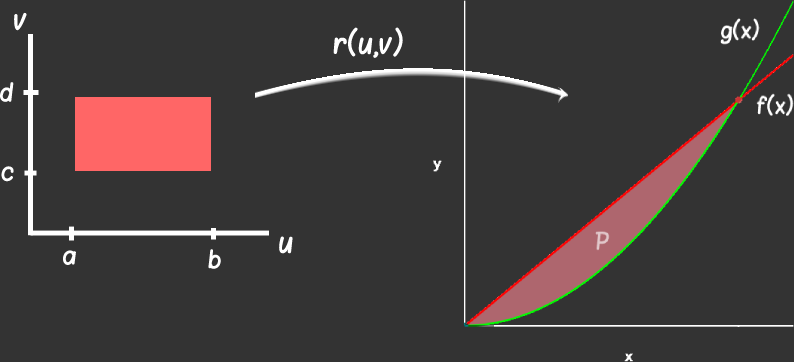
<style>
.page{position:relative;width:794px;height:362px;background:#333333}
.page>*{position:absolute;margin:0}
.t1{font:24px "Blokletters-Viltstift";color:#ffffff}
.t2{font:20px "Blokletters-Viltstift";color:#ffffff}
</style>
<div class="page">
<p class="t1" style="left:14px;top:12px;width:13px;height:19px">v</p>
<p class="t1" style="left:333px;top:27px;width:70px;height:31px">r(u,v)</p>
<p class="t2" style="left:0px;top:82px;width:14px;height:20px">d</p>
<p class="t2" style="left:1px;top:166px;width:13px;height:16px">c</p>
<p class="t1" style="left:279px;top:236px;width:14px;height:18px">u</p>
<p class="t2" style="left:63px;top:250px;width:13px;height:15px">a</p>
<p class="t2" style="left:208px;top:249px;width:13px;height:20px">b</p>
</div>
